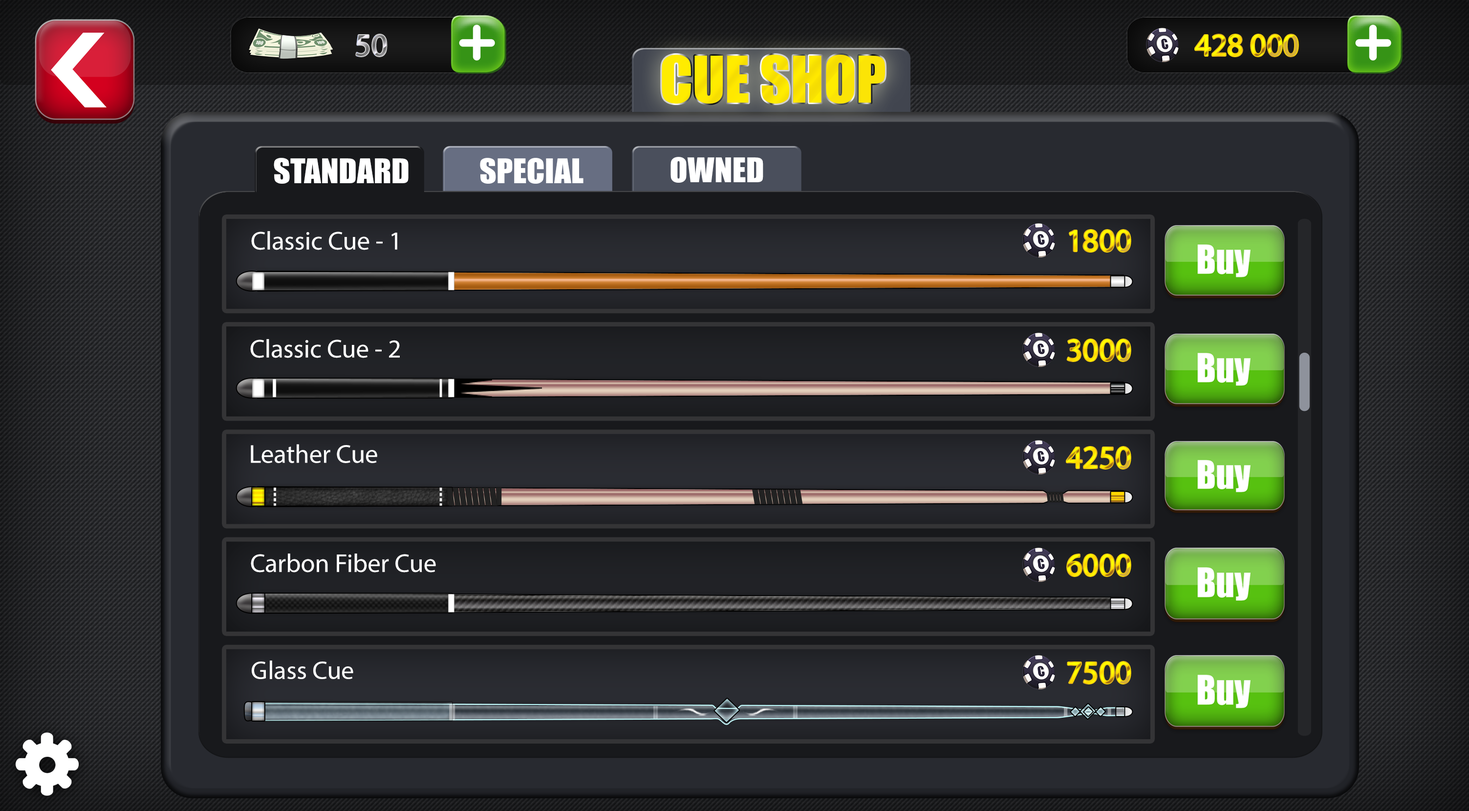
<style>
.page{position:relative;width:1469px;height:811px}
.page>*{position:absolute;margin:0}
.t1{font:31.6px "MyriadPro-Regular"}
.t2{font:31.6px "MyriadPro-Regular";color:#ffea00}
.t3{font:59.5px "Impact";color:#ffea00}
.t4{font:31.5px "Impact";color:#ffffff;scale:1.05 1}
.t5{font:25.9px "MyriadPro-Regular";color:#ffffff}
</style>
<div class="page">
<p class="t1" style="left:356px;top:35px;width:31px;height:21px">50</p>
<p class="t2" style="left:1196px;top:35px;width:102px;height:21px">428 000</p>
<p class="t3" style="left:662px;top:55px;width:224px;height:49px">CUE SHOP</p>
<p class="t4" style="left:274px;top:158px;width:135px;height:26px">STANDARD</p>
<p class="t4" style="left:480px;top:158px;width:104px;height:26px">SPECIAL</p>
<p class="t4" style="left:671px;top:157px;width:93px;height:26px">OWNED</p>
<p class="t5" style="left:251px;top:231px;width:146px;height:19px">Classic Cue - 1</p>
<p class="t2" style="left:1070px;top:230px;width:61px;height:22px">1800</p>
<p class="t5" style="left:250px;top:339px;width:150px;height:19px">Classic Cue - 2</p>
<p class="t2" style="left:1068px;top:340px;width:63px;height:21px">3000</p>
<p class="t5" style="left:251px;top:444px;width:126px;height:19px">Leather Cue</p>
<p class="t2" style="left:1067px;top:447px;width:64px;height:22px">4250</p>
<p class="t5" style="left:251px;top:554px;width:185px;height:19px">Carbon Fiber Cue</p>
<p class="t2" style="left:1068px;top:555px;width:63px;height:21px">6000</p>
<p class="t5" style="left:252px;top:661px;width:101px;height:18px">Glass Cue</p>
<p class="t2" style="left:1068px;top:662px;width:63px;height:22px">7500</p>
</div>
